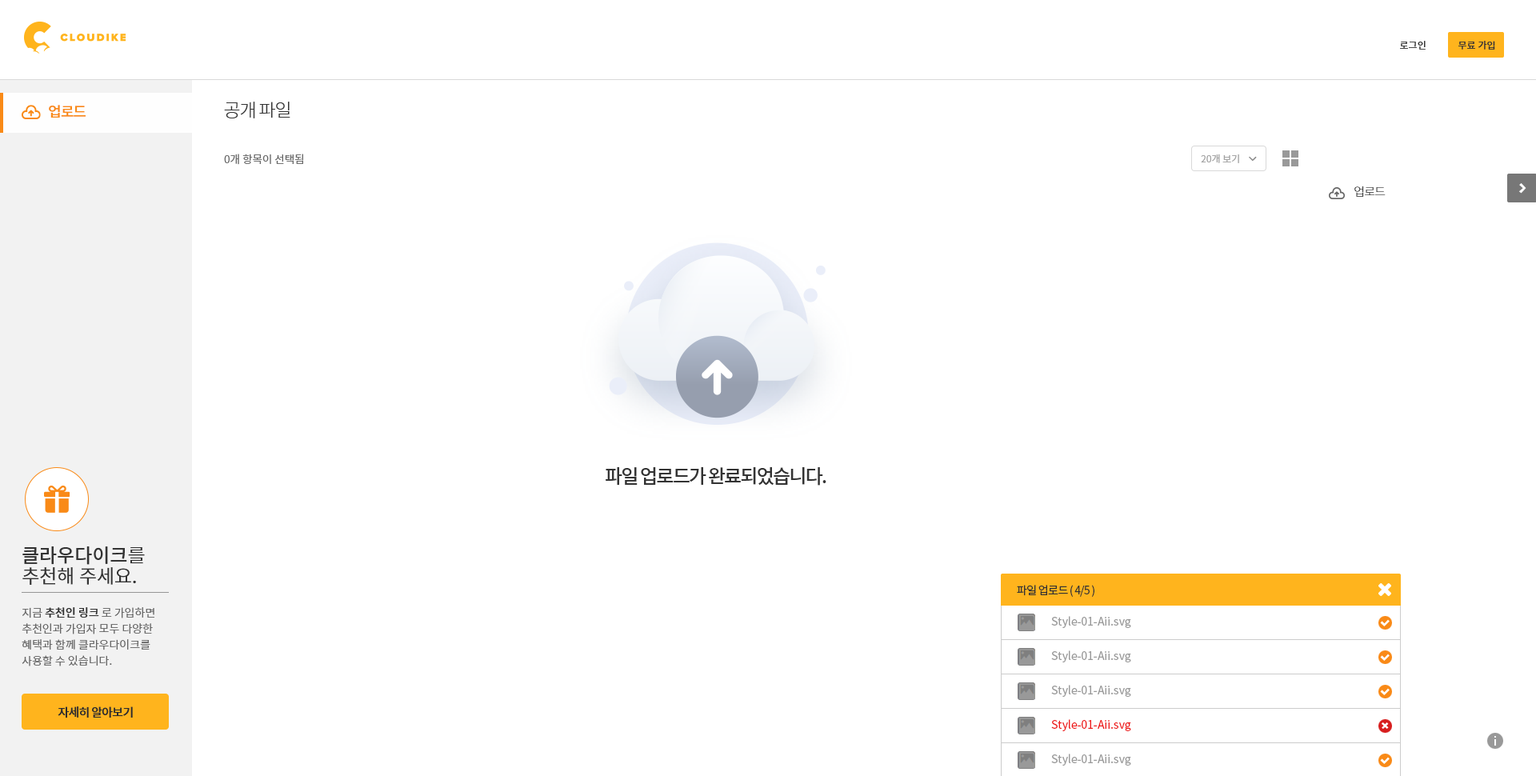
<style>
.page{position:relative;width:1536px;height:776px;background:#ffffff}
.page>*{position:absolute;margin:0}
.t1{font:9.6px "NotoSansCJKkr-Medium";color:#333333}
.t2{font:18.4px "NotoSansCJKkr-Light";letter-spacing:-0.05em;color:#333333}
.t3{font:14.4px "NotoSansCJKkr-Medium";letter-spacing:-0.05em;color:#f98a17}
.t4{font:10.8px "NotoSansCJKkr-DemiLight";color:#666666}
.t5{font:9.6px "NotoSansCJKkr-DemiLight";color:#a1a1a1}
.t6{font:12px "NotoSansCJKkr-Light";letter-spacing:-0.05em;color:#333333}
.t7{font:19.2px "NotoSansCJKkr-Medium";letter-spacing:-0.075em;color:#333333}
.t8{font:19.2px/20.8px "NotoSansCJKkr-DemiLight";color:#333333}
.t9{font:19.2px/20.8px "NotoSansCJKkr-Medium";color:#333333}
.t10{font:11.2px "NotoSansCJKkr-Regular";letter-spacing:-0.05em;color:#333333}
.t11{font:11.2px/16px "NotoSansCJKkr-DemiLight";color:#666666}
.t12{font:11.2px/16px "NotoSansCJKkr-Medium";color:#333333}
.t13{font:11.2px "NotoSansCJKkr-Regular";color:#999999}
.t14{font:12px "NotoSansCJKkr-Medium";letter-spacing:-0.05em;color:#2d2d2d}
.t15{font:11.2px "NotoSansCJKkr-Regular";color:#ee1a1a}
</style>
<div class="page">
<p class="t1" style="left:1400px;top:41px;width:26px;height:9px">로그인</p>
<p class="t1" style="left:1459px;top:41px;width:37px;height:9px">무료 가입</p>
<p class="t2" style="left:224px;top:102px;width:66px;height:16px">공개 파일</p>
<p class="t3" style="left:49px;top:105px;width:37px;height:13px">업로드</p>
<p class="t4" style="left:224px;top:154px;width:79px;height:11px">0개 항목이 선택됨</p>
<p class="t5" style="left:1201px;top:154px;width:38px;height:9px">20개 보기</p>
<p class="t6" style="left:1355px;top:186px;width:31px;height:11px">업로드</p>
<p class="t7" style="left:606px;top:466px;width:221px;height:20px">파일 업로드가 완료되었습니다.</p>
<p class="t8" style="left:22px;top:547px;width:123px;height:38px"><span class="t9">클라우다이크</span>를 <br>추천해 주세요.</p>
<p class="t10" style="left:1017px;top:585px;width:78px;height:12px">파일 업로드 ( 4/5 )</p>
<p class="t11" style="left:22px;top:607px;width:132px;height:60px">지금 <span class="t12">추천인 링크</span> 로 가입하면<br>추천인과 가입자 모두 다양한 <br>혜택과 함께 클라우다이크를 <br>사용할 수 있습니다.</p>
<p class="t13" style="left:1051px;top:616px;width:80px;height:12px">Style-01-Aii.svg</p>
<p class="t13" style="left:1051px;top:651px;width:80px;height:12px">Style-01-Aii.svg</p>
<p class="t13" style="left:1051px;top:685px;width:80px;height:12px">Style-01-Aii.svg</p>
<p class="t14" style="left:58px;top:707px;width:75px;height:12px">자세히 알아보기</p>
<p class="t15" style="left:1051px;top:719px;width:80px;height:12px">Style-01-Aii.svg</p>
<p class="t13" style="left:1051px;top:754px;width:80px;height:12px">Style-01-Aii.svg</p>
</div>
